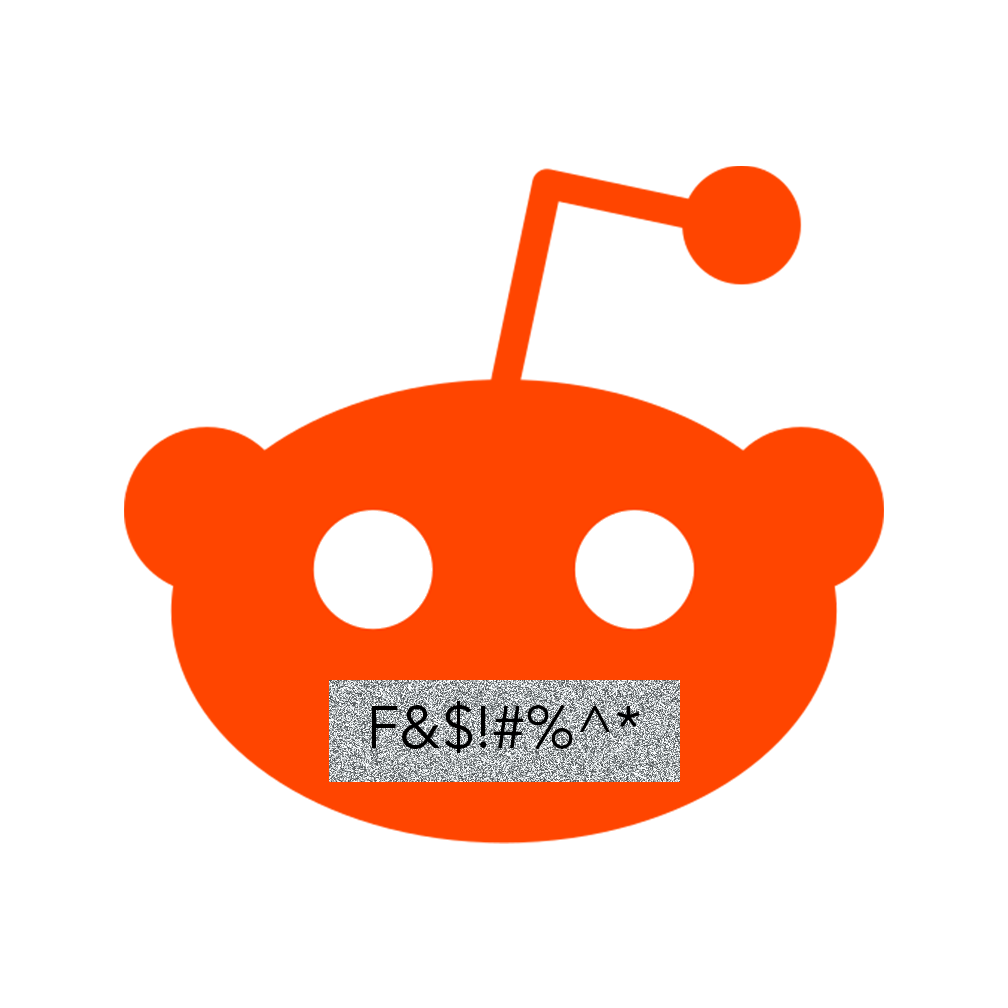
<style>
.page{position:relative;width:1008px;height:1008px;background:#ffffff}
.page>*{position:absolute;margin:0}
.t1{font:60px "AvenirLTStd-Book";color:#000000}
</style>
<div class="page">
<p class="t1" style="left:371px;top:701px;width:269px;height:52px">F&amp;$!#%^**</p>
</div>
